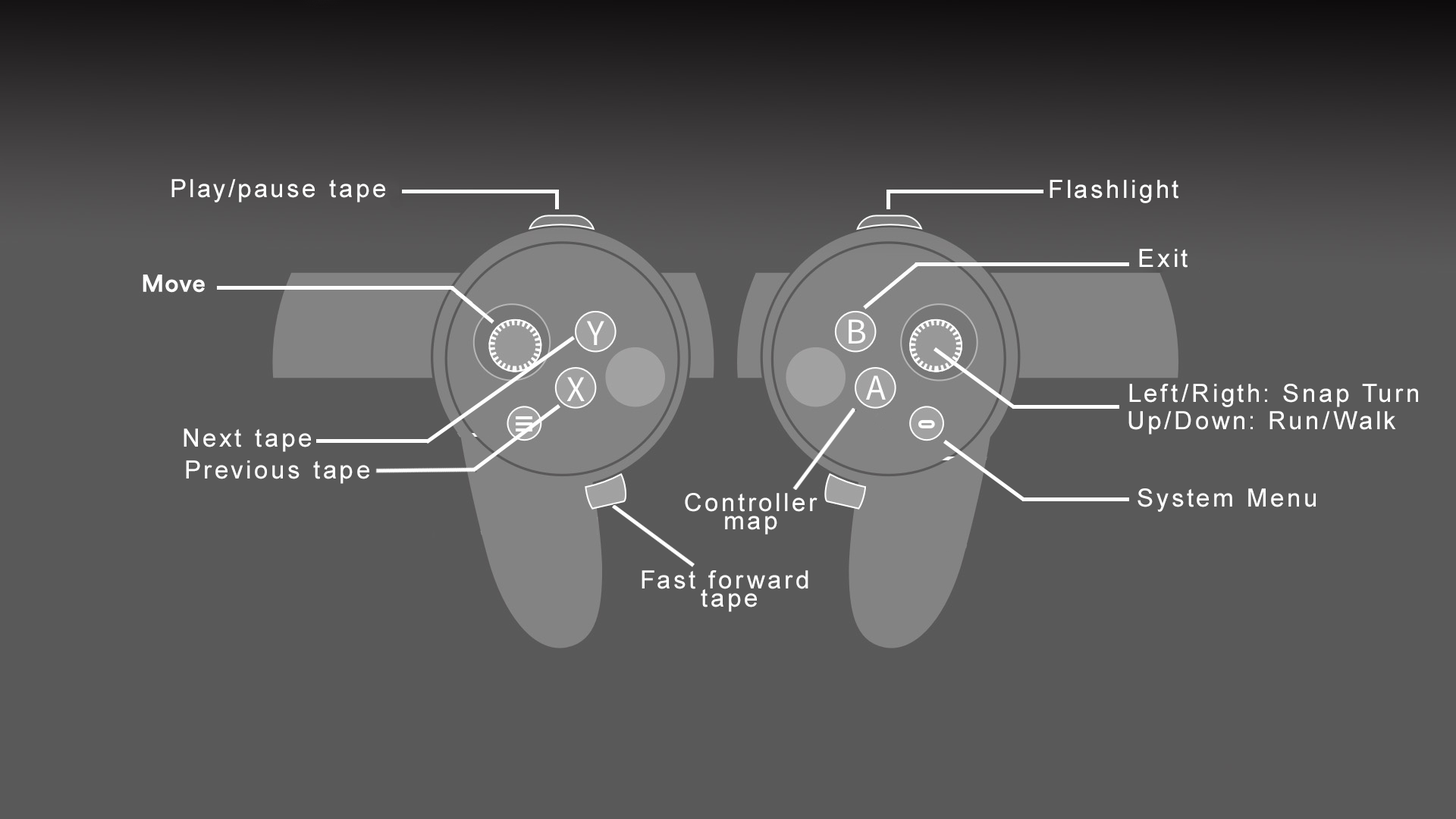
<style>
.page{position:relative;width:1456px;height:819px;background:#595959}
.page>*{position:absolute;margin:0}
.t1{font:25px "ArialMT";letter-spacing:0.12em;color:#ffffff}
.t2{font:25px/18.2px "ArialMT";letter-spacing:0.12em;color:#ffffff}
</style>
<div class="page">
<p class="t1" style="left:171px;top:179px;width:214px;height:23px">Play/pause tape</p>
<p class="t1" style="left:1050px;top:180px;width:128px;height:23px">Flashlight</p>
<p class="t1" style="left:1139px;top:249px;width:49px;height:19px">Exit</p>
<p class="t1" style="left:1129px;top:384px;width:289px;height:23px">Left/Rigth: Snap Turn</p>
<p class="t1" style="left:1128px;top:411px;width:268px;height:24px">Up/Down: Run/Walk</p>
<p class="t1" style="left:184px;top:428px;width:127px;height:24px">Next tape</p>
<p class="t1" style="left:186px;top:460px;width:183px;height:24px">Previous tape</p>
<p class="t2" style="left:685px;top:493px;width:132px;height:42px;text-align:center">Controller<br>map</p>
<p class="t1" style="left:1137px;top:488px;width:179px;height:24px">System Menu</p>
<p class="t2" style="left:642px;top:570px;width:166px;height:42px;text-align:center">Fast forward<br> tape</p>
</div>
